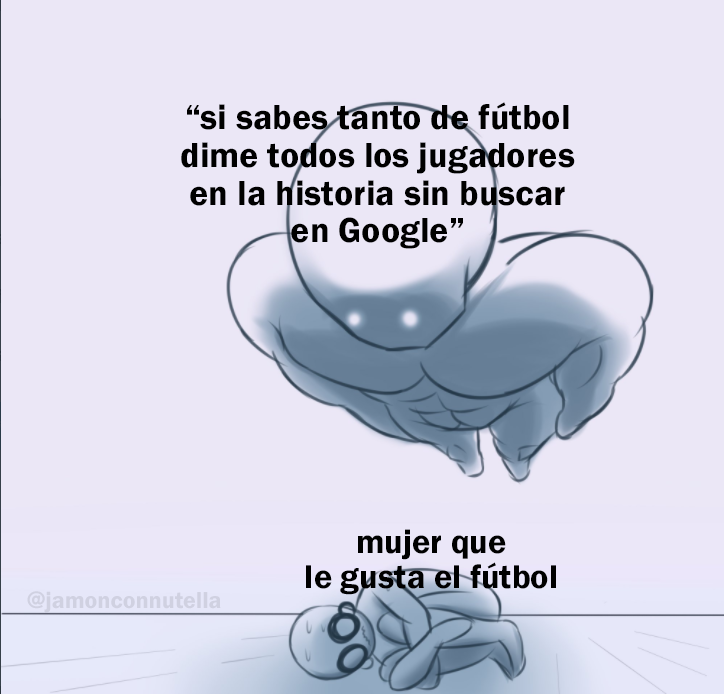
<style>
.page{position:relative;width:724px;height:694px;background:#ebe7f6}
.page>*{position:absolute;margin:0}
.t1{font:36px "FranklinGothic-Demi";color:#000000}
.t2{font:34.3px "FranklinGothic-Demi";color:#000000}
.t3{font:23.9px "FranklinGothic-Demi";color:#d0d1e1}
</style>
<div class="page">
<p class="t1" style="left:181px;top:102px;width:394px;height:147px;text-align:center">“si sabes tanto de fútbol<br>dime todos los jugadores<br>en la historia sin buscar<br>en Google”</p>
<p class="t2" style="left:306px;top:529px;width:250px;height:66px;text-align:center">mujer que<br>le gusta el fútbol</p>
<p class="t3" style="left:27px;top:591px;width:194px;height:22px">@jamonconnutella</p>
</div>
